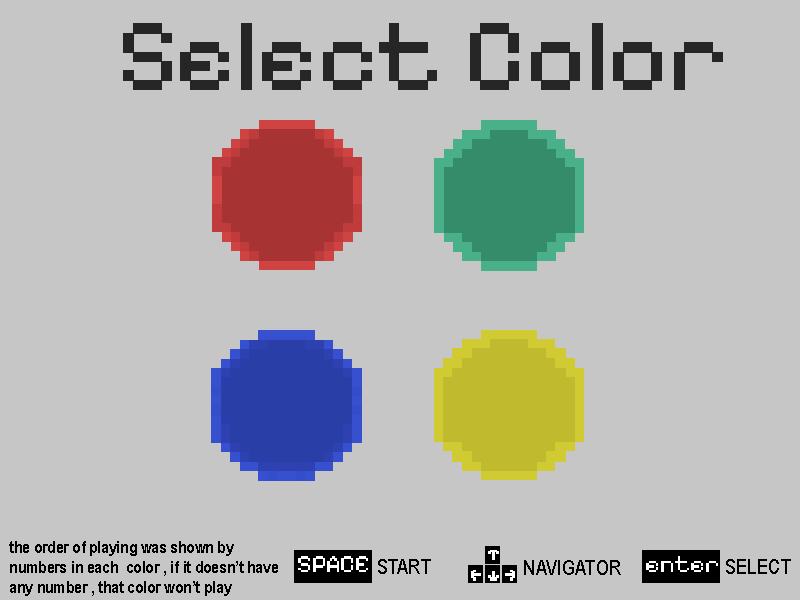
<style>
.page{position:relative;width:800px;height:600px;background:#c6c6c6}
.page>*{position:absolute;margin:0}
.t1{font:104.2px "PixelifySans-Regular";color:#262626}
.t2{font:16.7px "ArialNarrow-Bold";color:#000000}
.t3{font:25px "PixelifySans-Regular";color:#ffffff}
.t4{font:20.8px "ArialNarrow";color:#000000}
</style>
<div class="page">
<p class="t1" style="left:123px;top:23px;width:600px;height:67px">Select Color</p>
<p class="t2" style="left:9px;top:541px;width:269px;height:55px">the order of playing was shown by numbers in each  color , if it doesn’t have any number , that color won’t play</p>
<p class="t3" style="left:298px;top:556px;width:70px;height:16px">SPACE</p>
<p class="t3" style="left:646px;top:556px;width:72px;height:16px">enter</p>
<p class="t4" style="left:378px;top:559px;width:53px;height:15px">START</p>
<p class="t4" style="left:524px;top:560px;width:97px;height:15px">NAVIGATOR</p>
<p class="t4" style="left:726px;top:559px;width:65px;height:15px">SELECT</p>
</div>
